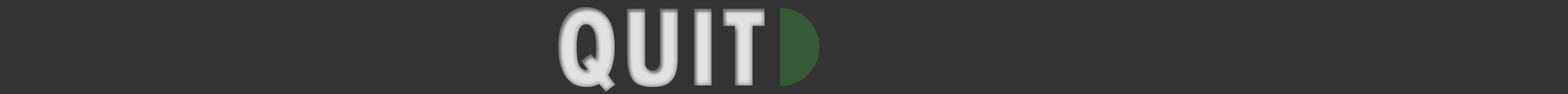
<style>
.page{position:relative;width:1568px;height:94px;background:#333333}
.page>*{position:absolute;margin:0}
.t1{font:117.6px "TwCenMT-CondensedExtraBold";color:#e2e2e2}
</style>
<div class="page">
<p class="t1" style="left:558px;top:7px;width:207px;height:86px">QUIT</p>
</div>
